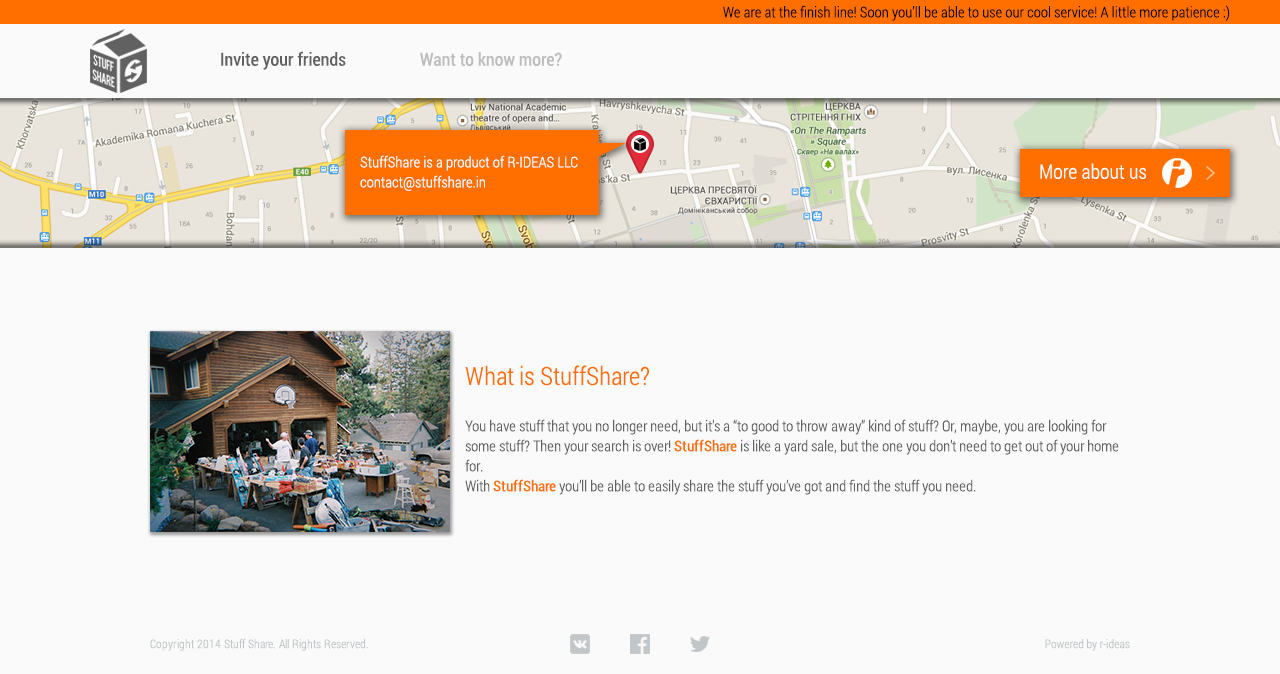
<style>
.page{position:relative;width:1280px;height:674px;background:#fafafa}
.page>*{position:absolute;margin:0}
.t1{font:15px "RobotoCondensed-Light";color:#030303}
.t2{font:18px "RobotoCondensed-Regular";color:#616161}
.t3{font:18px "RobotoCondensed-Regular";color:#bdbdbd}
.t4{font:15px/20px "RobotoCondensed-Light";color:#fefefe}
.t5{font:20px "RobotoCondensed-Light";color:#fefefe}
.t6{font:25px "RobotoCondensed-Light";color:#ff6f00}
.t7{font:15px/20px "RobotoCondensed-Light";color:#616161}
.t8{font:15px/20px "RobotoCondensed-Regular";color:#ff6f00}
.t9{font:12px "RobotoCondensed-Light";color:#c2c6c8}
</style>
<div class="page">
<p class="t1" style="left:723px;top:5px;width:507px;height:16px">We are at the finish line! Soon you’ll be able to use our cool service! A little more patience :)</p>
<p class="t2" style="left:221px;top:51px;width:125px;height:19px">Invite your friends</p>
<p class="t3" style="left:420px;top:52px;width:142px;height:14px">Want to know more?</p>
<p class="t4" style="left:360px;top:155px;width:218px;height:36px;text-align:justify">StuffShare is a product of R-IDEAS LLC<br>contact@stuffshare.in</p>
<p class="t5" style="left:1040px;top:163px;width:107px;height:16px">More about us</p>
<p class="t6" style="left:465px;top:365px;width:184px;height:21px">What is StuffShare?</p>
<p class="t7" style="left:465px;top:419px;width:654px;height:76px">You have stuff that you no longer need, but it’s a “to good to throw away” kind of stuff? Or, maybe, you are looking for some stuff? Then your search is over! <span class="t8">StuffShare </span>is like a yard sale, but the one you don’t need to get out of your home for.<br>With <span class="t8">StuffShare </span>you’ll be able to easily share the stuff you’ve got and find the stuff you need.</p>
<p class="t9" style="left:150px;top:638px;width:218px;height:13px">Copyright 2014 Stuff Share. All Rights Reserved.</p>
<p class="t9" style="left:1045px;top:639px;width:85px;height:12px">Powered by r-ideas</p>
</div>
